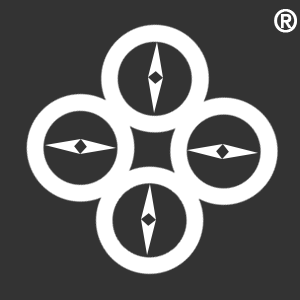
<style>
.page{position:relative;width:300px;height:300px;background:#333333}
.page>*{position:absolute;margin:0}
.t1{font:29.2px "HelveticaNeue";color:#ffffff;font-weight:bold}
</style>
<div class="page">
<p class="t1" style="left:274px;top:9px;width:23px;height:24px">®</p>
</div>
